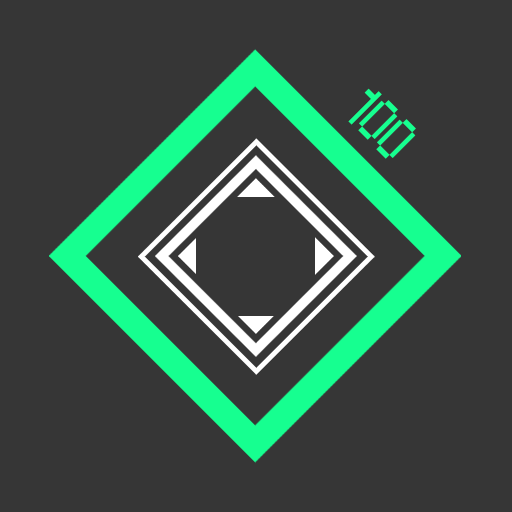
<style>
.page{position:relative;width:512px;height:512px;background:#363636}
.page>*{position:absolute;margin:0}
.t1{font:56.9px "Small Fonts";color:#16ff90}
</style>
<div class="page">
<p class="t1" style="left:348px;top:88px;width:68px;height:71px;rotate:45deg">100</p>
</div>
